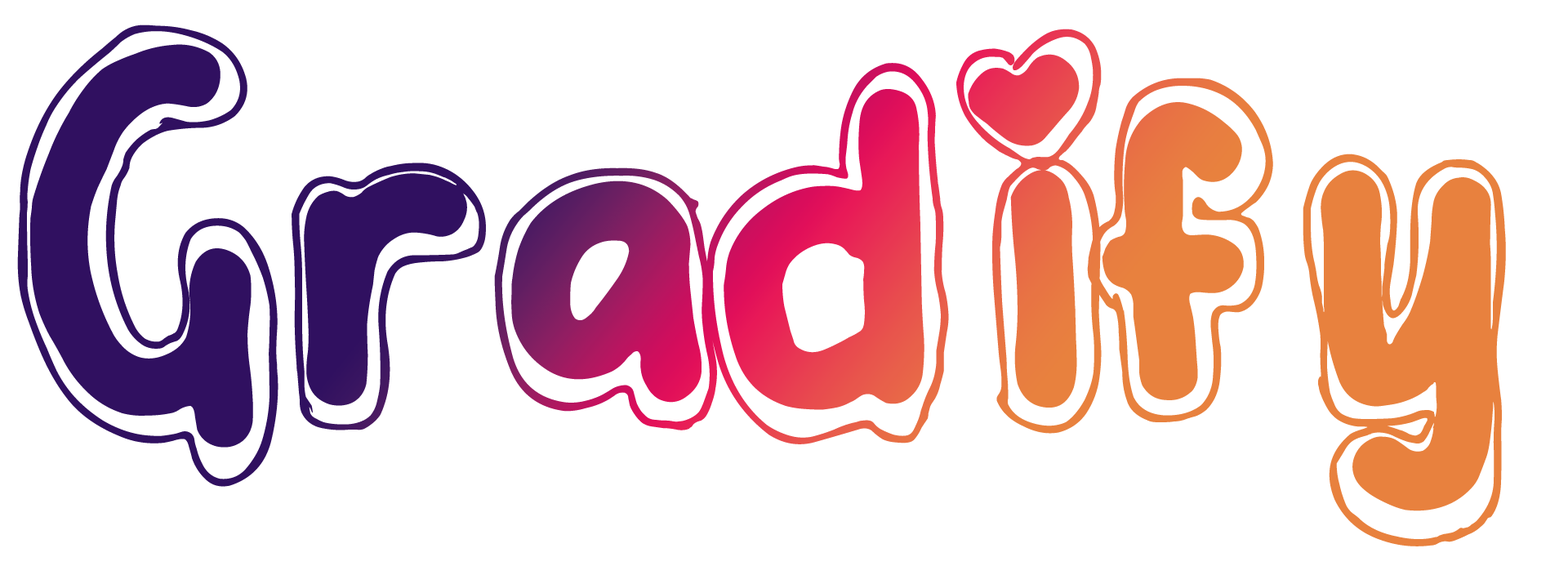
<style>
.page{position:relative;width:1568px;height:575px;background:#ffffff}
.page>*{position:absolute;margin:0}
.t1{font:755.4px "Outline"}
</style>
<div class="page">
<p class="t1" style="left:17px;top:24px;width:1489px;height:522px">Gradify</p>
</div>
